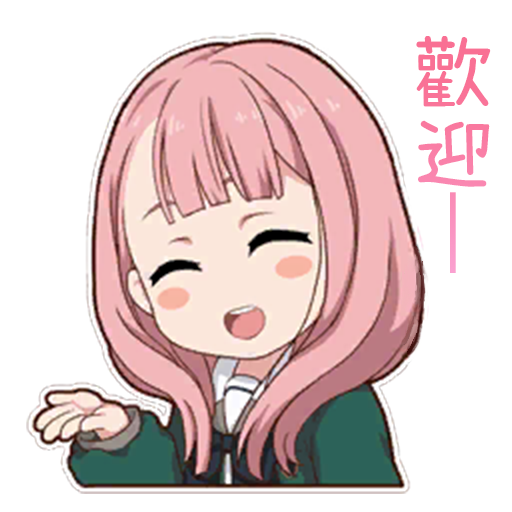
<style>
.page{position:relative;width:512px;height:512px;background:#ffffff}
.page>*{position:absolute;margin:0}
.t1{font:80px "SetoFont";color:#f9789e}
.t2{font:80px "MS-UIGothic";color:#f9789e;font-weight:bold}
</style>
<div class="page">
<p class="t1" style="left:416px;top:36px;width:75px;height:237px">歡迎<span class="t2">─</span></p>
</div>
